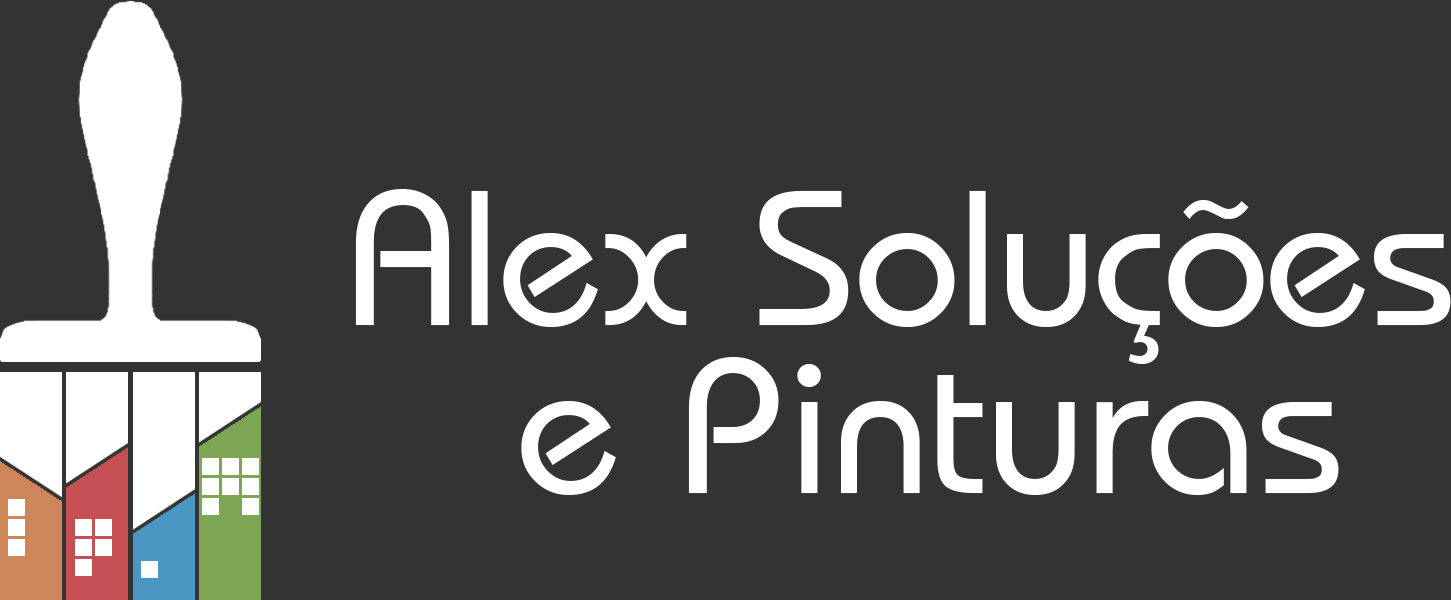
<style>
.page{position:relative;width:1451px;height:600px;background:#333333}
.page>*{position:absolute;margin:0}
.t1{font:200px/24px "Bauhaus-Regular";color:#ffffff}
</style>
<div class="page">
<p class="t1" style="left:355px;top:188px;width:1096px;height:307px;text-align:center">Alex Soluções <br><br><br><br><br><br><br>e Pinturas</p>
</div>
